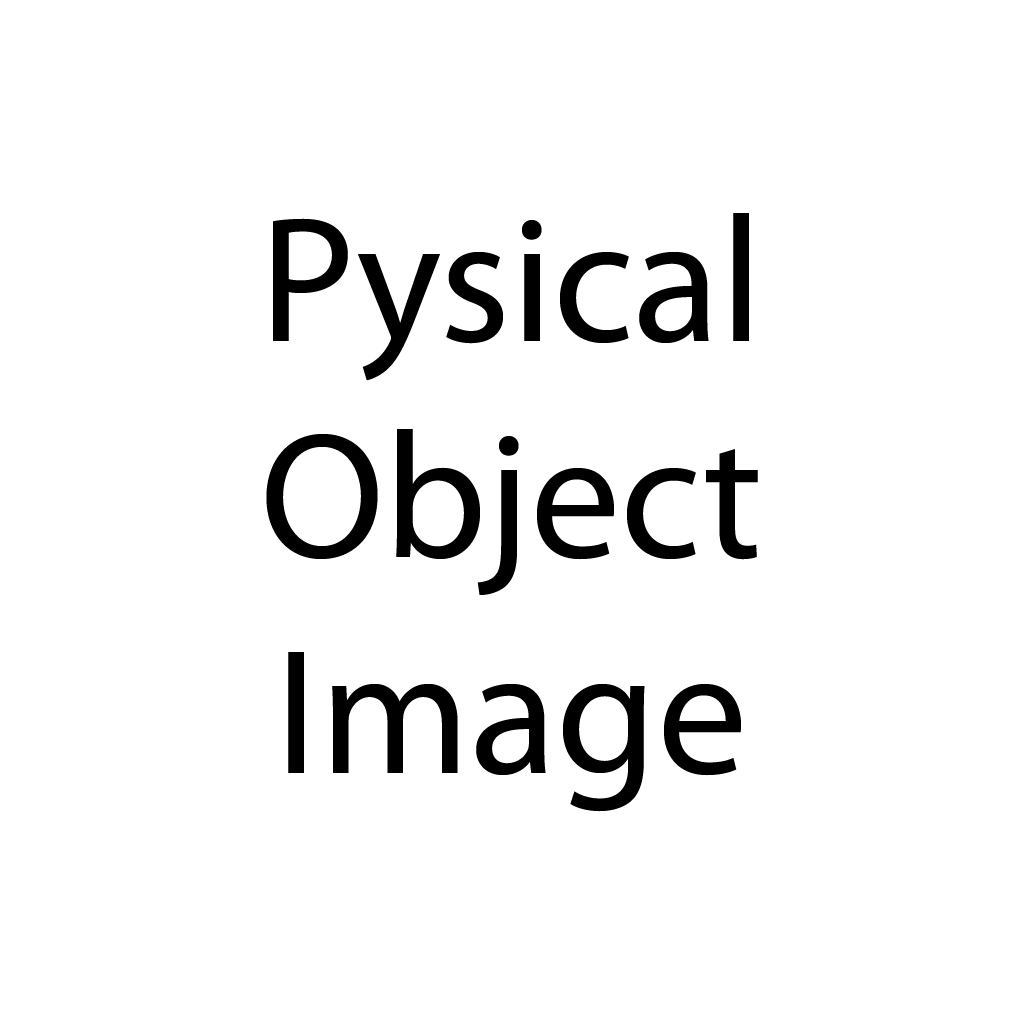
<style>
.page{position:relative;width:1024px;height:1024px;background:#ffffff}
.page>*{position:absolute;margin:0}
.t1{font:180px "MyriadPro-Regular";color:#000000}
</style>
<div class="page">
<p class="t1" style="left:266px;top:213px;width:492px;height:599px;text-align:center">Pysical<br>Object<br>Image</p>
</div>
